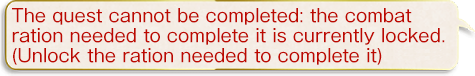
<style>
.page{position:relative;width:475px;height:76px}
.page>*{position:absolute;margin:0}
.t1{font:18px/20px "GothicMB101Pro-Regular";color:#bd0800}
</style>
<div class="page">
<p class="t1" style="left:12px;top:8px;width:433px;height:57px">The quest cannot be completed: the combat<br>ration needed to complete it is currently locked.<br>(Unlock the ration needed to complete it)</p>
</div>
